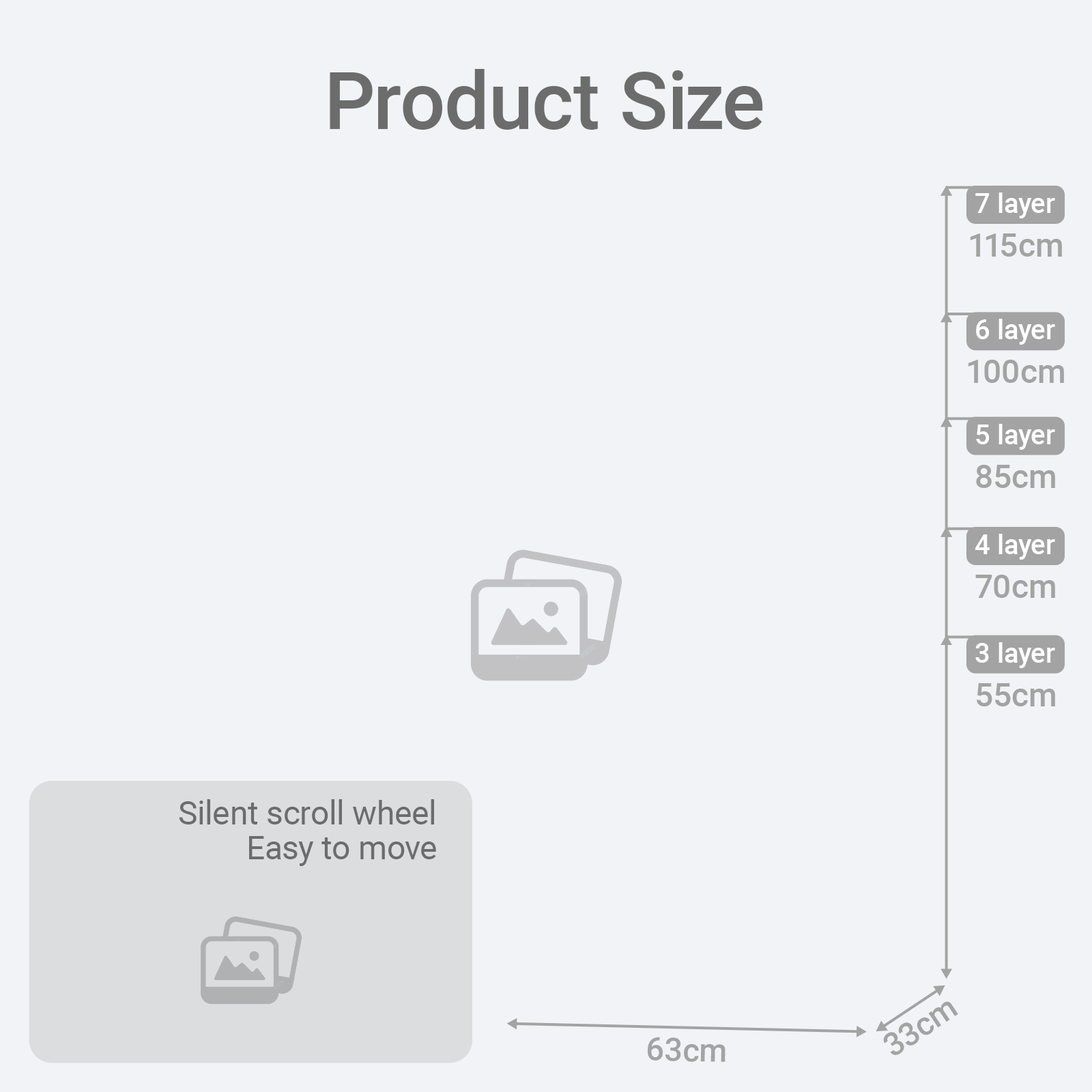
<style>
.page{position:relative;width:1092px;height:1092px;background:#f2f3f6}
.page>*{position:absolute;margin:0}
.t1{font:80.1px "Roboto-Medium";color:#6c6c6c}
.t2{font:27.3px "Roboto-Medium";color:#ffffff}
.t3{font:32.8px "Roboto-Medium";color:#a3a3a3}
.t4{font:32.8px/34.6px "Roboto-Regular";color:#6c6c6c}
.t5{font:32.3px "Roboto-Medium";color:#a3a3a3}
</style>
<div class="page">
<p class="t1" style="left:330px;top:69px;width:433px;height:61px">Product Size</p>
<p class="t2" style="left:975px;top:192px;width:80px;height:26px">7 layer</p>
<p class="t3" style="left:970px;top:233px;width:92px;height:24px">115cm</p>
<p class="t2" style="left:976px;top:319px;width:79px;height:26px">6 layer</p>
<p class="t3" style="left:968px;top:360px;width:96px;height:23px">100cm</p>
<p class="t2" style="left:976px;top:424px;width:79px;height:26px">5 layer</p>
<p class="t3" style="left:976px;top:465px;width:79px;height:23px">85cm</p>
<p class="t2" style="left:975px;top:534px;width:80px;height:26px">4 layer</p>
<p class="t3" style="left:975px;top:575px;width:80px;height:23px">70cm</p>
<p class="t2" style="left:975px;top:642px;width:80px;height:26px">3 layer</p>
<p class="t3" style="left:977px;top:683px;width:78px;height:23px">55cm</p>
<p class="t4" style="left:179px;top:799px;width:257px;height:67px;text-align:right">Silent scroll wheel<br>Easy to move</p>
<p class="t5" style="left:883px;top:1001px;width:75px;height:54px;rotate:-34deg">33cm</p>
<p class="t5" style="left:648px;top:1037px;width:77px;height:25px;rotate:1deg">63cm</p>
</div>
